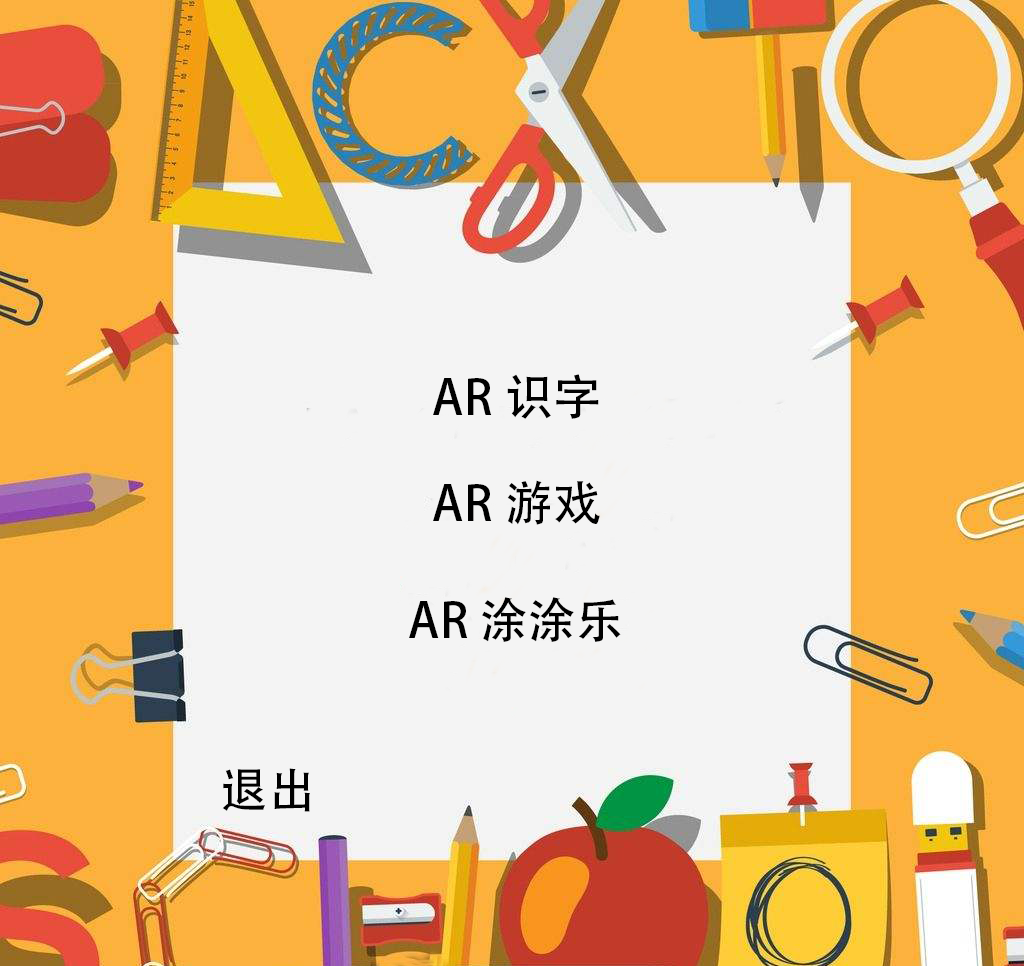
<style>
.page{position:relative;width:1024px;height:966px;background:#f4f4f4}
.page>*{position:absolute;margin:0}
.t1{font:48px "AdobeHeitiStd-Regular";color:#000000}
</style>
<div class="page">
<p class="t1" style="left:433px;top:374px;width:166px;height:45px">AR识字</p>
<p class="t1" style="left:433px;top:480px;width:167px;height:45px">AR游戏</p>
<p class="t1" style="left:409px;top:597px;width:212px;height:45px">AR涂涂乐</p>
<p class="t1" style="left:222px;top:768px;width:88px;height:44px">退出</p>
</div>
